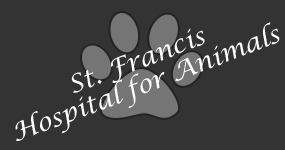
<style>
.page{position:relative;width:285px;height:150px;background:#333333}
.page>*{position:absolute;margin:0}
.t1{font:25px/25px "LucidaCalligraphy-Italic";color:#ffffff}
</style>
<div class="page">
<p class="t1" style="left:15px;top:22px;width:265px;height:119px;text-align:center;rotate:-21deg">St. Francis<br>Hospital for Animals</p>
</div>
